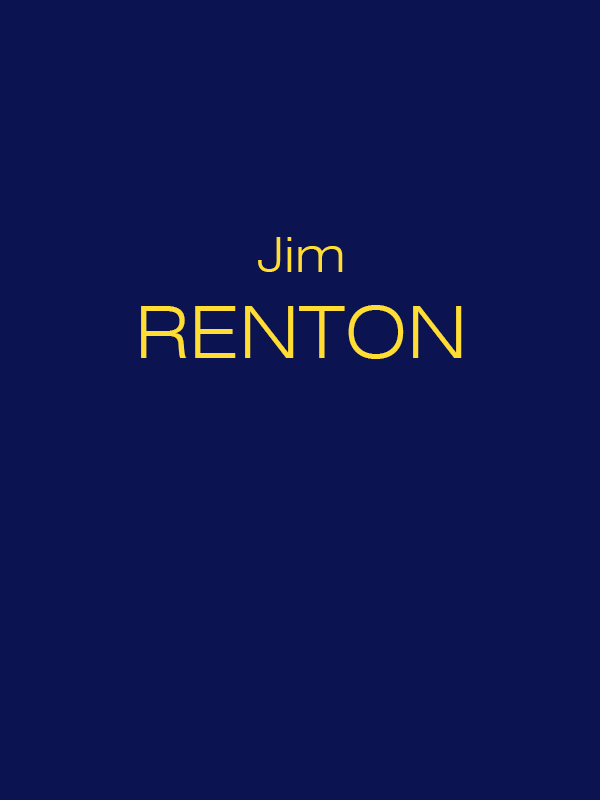
<style>
.page{position:relative;width:600px;height:800px;background:#0b1451}
.page>*{position:absolute;margin:0}
.t1{font:72px "Swiss721BT-LightExtended";color:#ffdd33}
.t2{font:48px "Swiss721BT-LightExtended";color:#ffdd33}
</style>
<div class="page">
<p class="t1" style="left:141px;top:237px;width:321px;height:122px;text-align:center"><span class="t2">Jim<br></span>RENTON</p>
</div>
